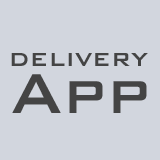
<style>
.page{position:relative;width:160px;height:160px;background:#d2d6de}
.page>*{position:absolute;margin:0}
.t1{font:25px "BankGothicBT-Medium";color:#444444}
.t2{font:75px "BankGothicBT-Medium";color:#444444;scale:0.92 1}
</style>
<div class="page">
<p class="t1" style="left:11px;top:53px;width:137px;height:13px">DELIVERY</p>
<p class="t2" style="left:12px;top:74px;width:135px;height:39px">App</p>
</div>
